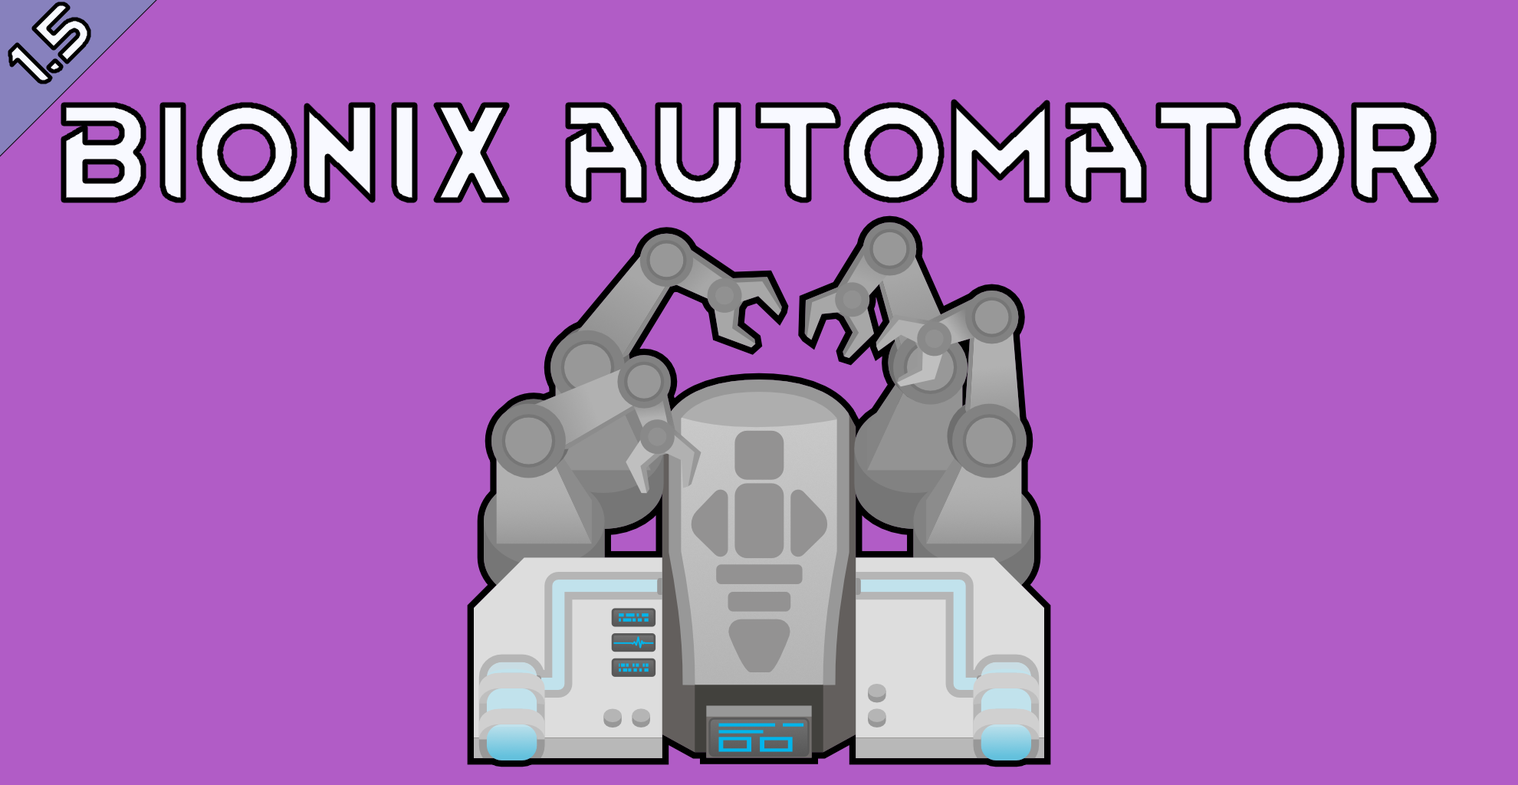
<style>
.page{position:relative;width:1518px;height:785px;background:#b15cc6}
.page>*{position:absolute;margin:0}
.t1{font:115px "RimWordFont";color:#f8f9ff}
</style>
<div class="page">
<p class="t1" style="left:64px;top:102px;width:1372px;height:98px">bionix automator</p>
</div>
